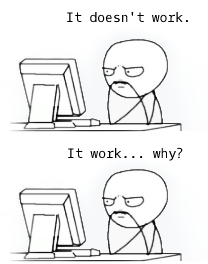
<style>
.page{position:relative;width:208px;height:264px;background:#ffffff}
.page>*{position:absolute;margin:0}
.t1{font:13px "OxygenMono-Regular";color:#000000}
</style>
<div class="page">
<p class="t1" style="left:67px;top:11px;width:121px;height:12px">It doesn't work.</p>
<p class="t1" style="left:68px;top:147px;width:115px;height:14px">It work... why?</p>
</div>
